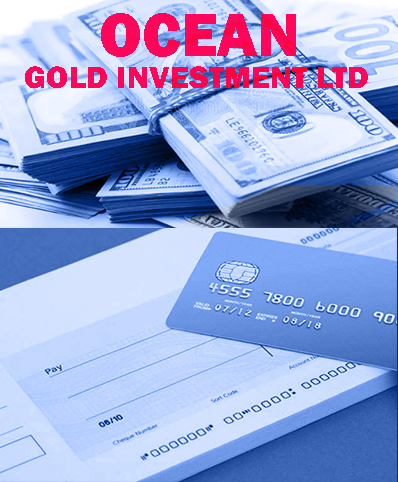
<style>
.page{position:relative;width:398px;height:482px}
.page>*{position:absolute;margin:0}
.t1{font:63.1px "FranklinGothic-Heavy";color:#fe075a}
.t2{font:32.5px "FranklinGothic-Heavy";color:#fd065a}
</style>
<div class="page">
<p class="t1" style="left:101px;top:13px;width:195px;height:44px">OCEAN</p>
<p class="t2" style="left:25px;top:66px;width:343px;height:22px">GOLD INVESTMENT LTD</p>
</div>
